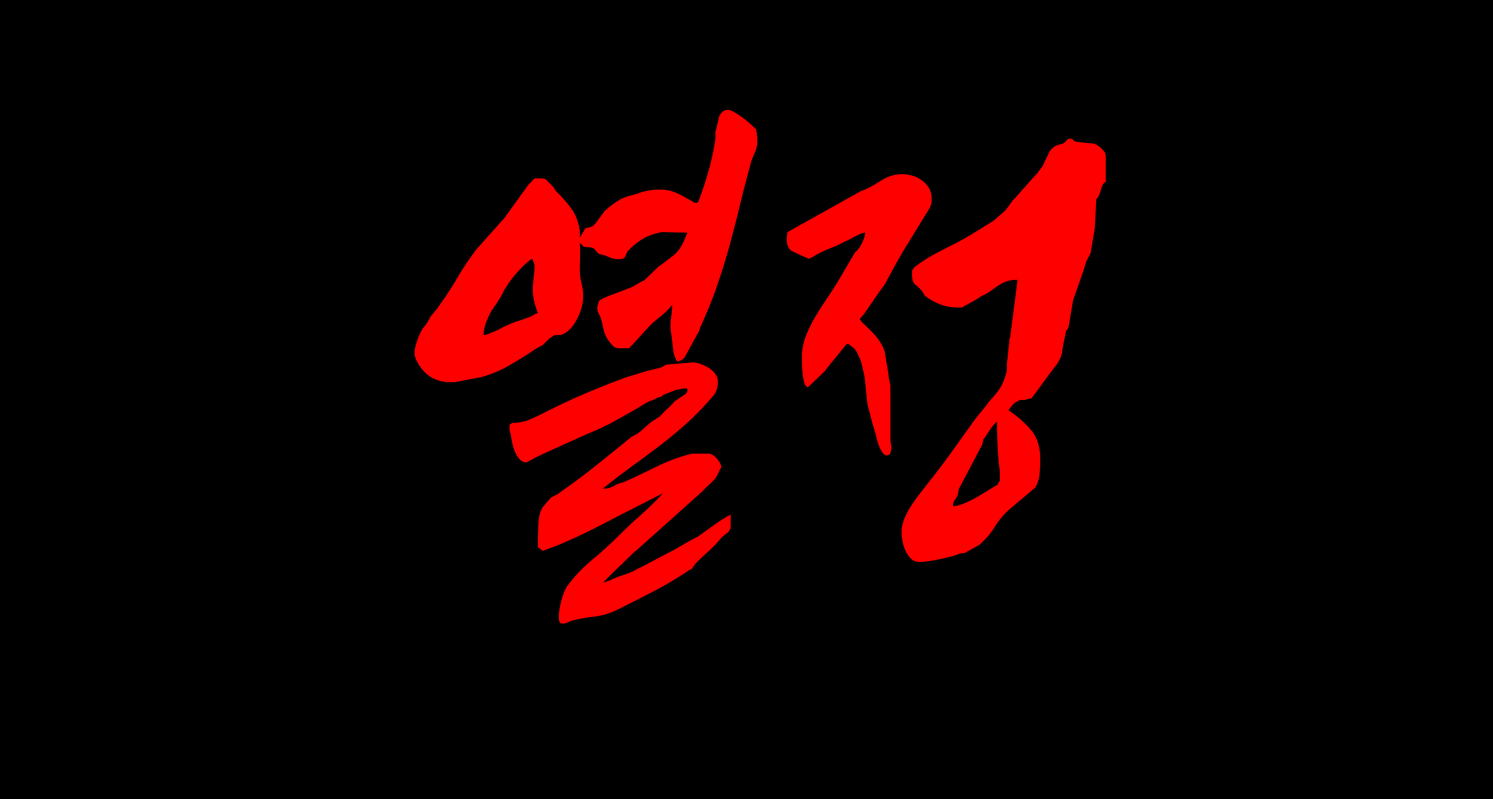
<style>
.page{position:relative;width:1493px;height:799px;background:#000000}
.page>*{position:absolute;margin:0}
.t1{font:530.3px "JSArirang-Regular";color:#ff0000;scale:0.89 1}
</style>
<div class="page">
<p class="t1" style="left:414px;top:110px;width:692px;height:514px">열정</p>
</div>
